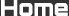
<style>
.page{position:relative;width:69px;height:16px;background:#fefefe}
.page>*{position:absolute;margin:0}
.t1{font:22px "Orbitron-Black";color:#fefefe}
</style>
<div class="page">
<p class="t1" style="left:1px;top:0px;width:67px;height:16px">Home</p>
</div>
